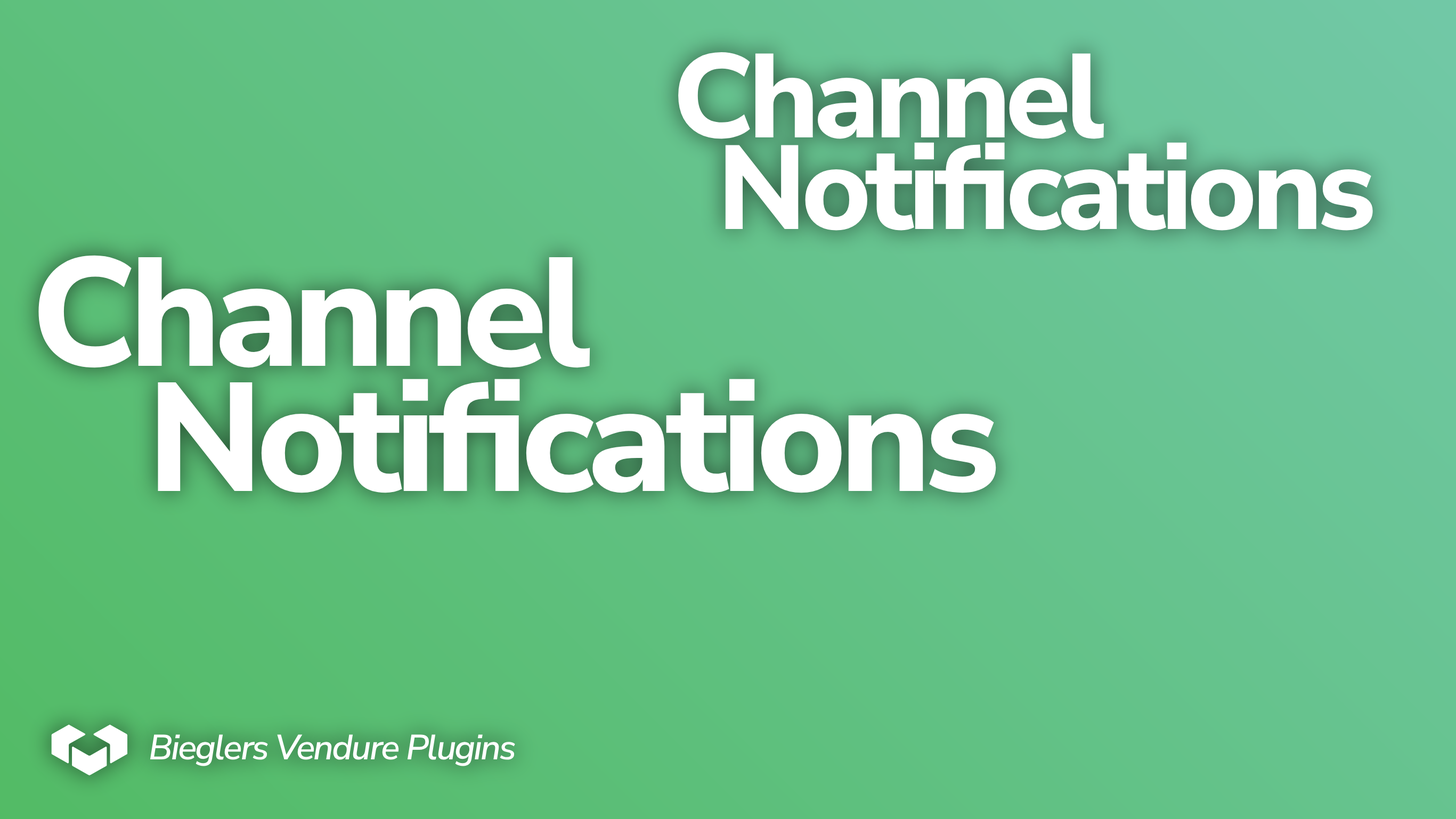
<style>
.page{position:relative;width:1456px;height:819px}
.page>*{position:absolute;margin:0}
.t1{font:119px/91.4px "NunitoSans-ExtraBold";letter-spacing:-0.045em;color:#ffffff}
.t2{font:154.1px/125.2px "NunitoSans-ExtraBold";letter-spacing:-0.045em;color:#ffffff}
.t3{font:35.2px "NunitoSans-SemiBoldItalic";letter-spacing:-0.045em;color:#ffffff}
</style>
<div class="page">
<p class="t1" style="left:678px;top:52px;width:695px;height:179px">Channel<br>  Notifications</p>
<p class="t2" style="left:38px;top:255px;width:958px;height:238px">Channel<br>    Notifications</p>
<p class="t3" style="left:150px;top:734px;width:365px;height:32px">Bieglers Vendure Plugins</p>
</div>
